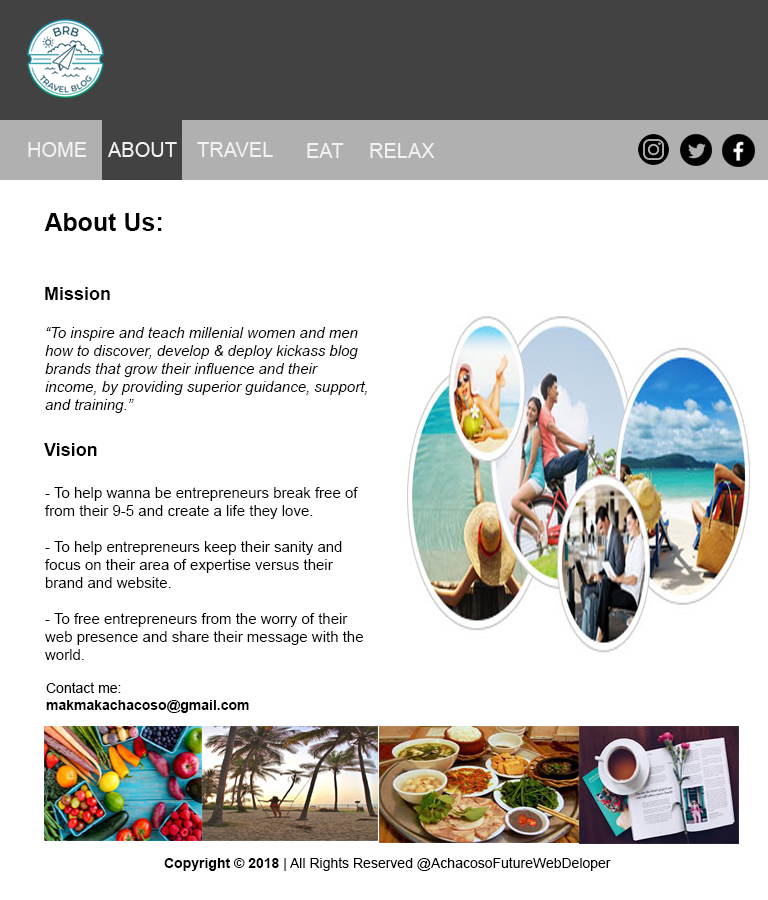
<style>
.page{position:relative;width:768px;height:900px;background:#ffffff}
.page>*{position:absolute;margin:0}
.t1{font:20px "ArialMT";color:#f2f2f3}
.t2{font:25px "Arial-BoldMT";color:#000000}
.t3{font:18px "Arial-BoldMT";color:#000000}
.t4{font:15px "Arial-ItalicMT";color:#000000}
.t5{font:15px "ArialMT";color:#000000}
.t6{font:14px "Arial-BoldMT";color:#000000}
.t7{font:14px "ArialMT";color:#000000}
</style>
<div class="page">
<p class="t1" style="left:28px;top:142px;width:59px;height:15px">HOME</p>
<p class="t1" style="left:108px;top:142px;width:69px;height:15px">ABOUT</p>
<p class="t1" style="left:197px;top:142px;width:76px;height:15px">TRAVEL</p>
<p class="t1" style="left:307px;top:143px;width:37px;height:15px">EAT</p>
<p class="t1" style="left:370px;top:143px;width:65px;height:15px">RELAX</p>
<p class="t2" style="left:44px;top:213px;width:118px;height:18px">About Us:</p>
<p class="t3" style="left:45px;top:287px;width:65px;height:13px">Mission</p>
<p class="t4" style="left:45px;top:327px;width:322px;height:86px">“To inspire and teach millenial women and men how to discover, develop &amp; deploy kickass blog brands that grow their influence and their income, by providing superior guidance, support, and training.”</p>
<p class="t3" style="left:44px;top:443px;width:53px;height:13px">Vision</p>
<p class="t5" style="left:45px;top:487px;width:318px;height:173px">- To help wanna be entrepreneurs break free of from their 9-5 and create a life they love.<br><br>- To help entrepreneurs keep their sanity and focus on their area of expertise versus their brand and website.<br><br>- To free entrepreneurs from the worry of their web presence and share their message with the world.</p>
<p class="t6" style="left:46px;top:682px;width:203px;height:31px"><span class="t7">Contact me:<br></span>makmakachacoso@gmail.com</p>
<p class="t7" style="left:164px;top:857px;width:447px;height:14px"><span class="t6">Copyright © 2018 </span>| All Rights Reserved @AchacosoFutureWebDeloper</p>
</div>
